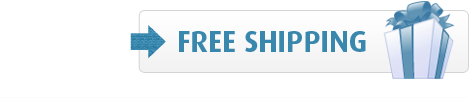
<style>
.page{position:relative;width:469px;height:98px;background:#ffffff}
.page>*{position:absolute;margin:0}
.t1{font:30px "Dax-Bold";color:#3a87ad}
</style>
<div class="page">
<p class="t1" style="left:179px;top:31px;width:187px;height:21px">FREE SHIPPING</p>
</div>
